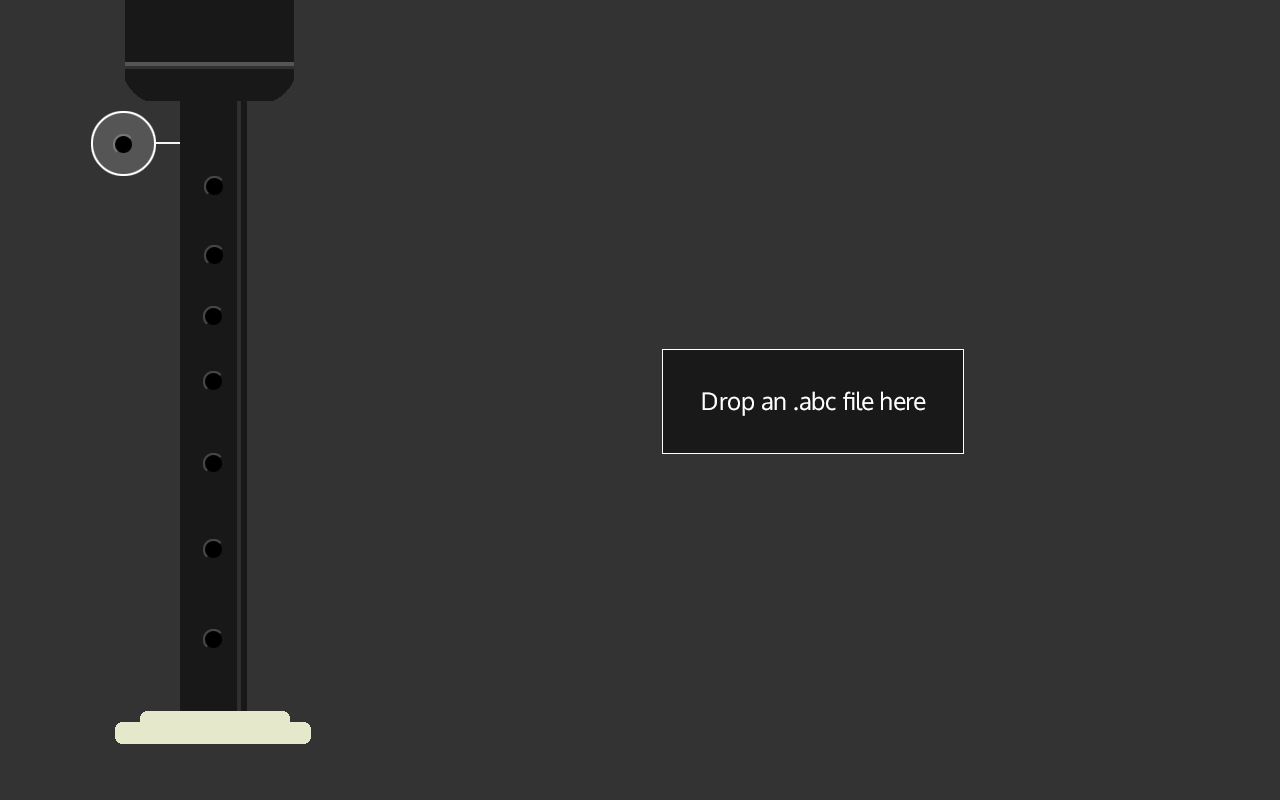
<style>
.page{position:relative;width:1280px;height:800px;background:#333333}
.page>*{position:absolute;margin:0}
.t1{font:24px "Oxygen-Regular";color:#ffffff}
</style>
<div class="page">
<p class="t1" style="left:702px;top:391px;width:224px;height:25px">Drop an .abc file here</p>
</div>
